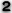
<style>
.page{position:relative;width:12px;height:13px}
.page>*{position:absolute;margin:0}
.t1{font:13.9px "K2D-ExtraBold";color:#000000}
</style>
<div class="page">
<p class="t1" style="left:2px;top:1px;width:9px;height:11px">2</p>
</div>
